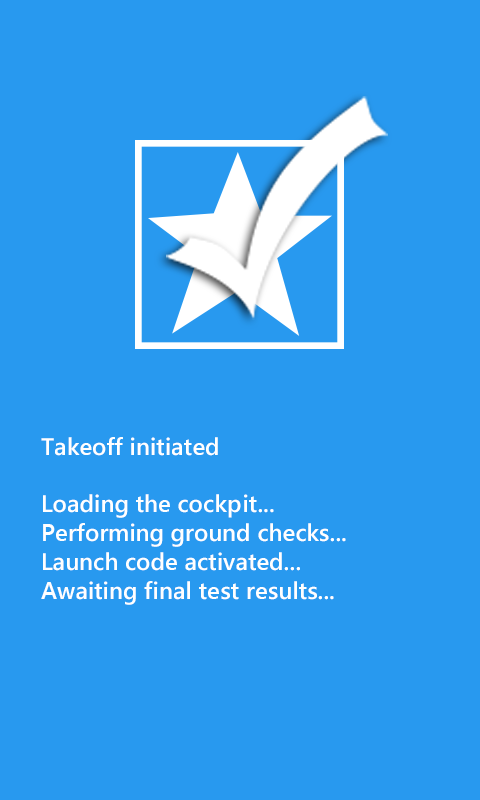
<style>
.page{position:relative;width:480px;height:800px;background:#2899ef}
.page>*{position:absolute;margin:0}
.t1{font:24px "SegoeWP-Semibold";color:#ffffff}
</style>
<div class="page">
<p class="t1" style="left:41px;top:437px;width:305px;height:168px">Takeoff initiated<br><br>Loading the cockpit...<br>Performing ground checks...<br>Launch code activated...<br>Awaiting final test results...</p>
</div>
